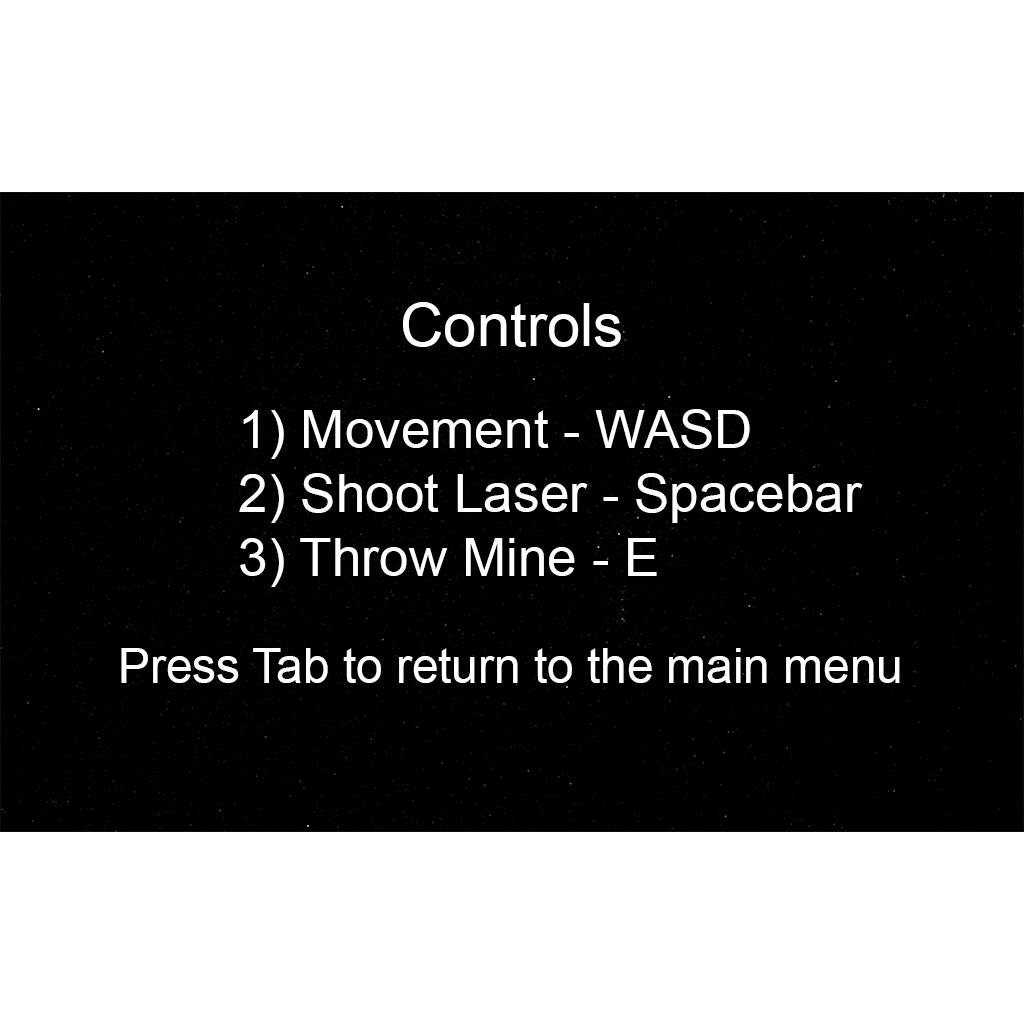
<style>
.page{position:relative;width:1024px;height:1024px;background:#000000}
.page>*{position:absolute;margin:0}
.t1{font:60px "ArialMT";color:#ffffff}
.t2{font:53.1px "ArialMT";color:#ffffff}
.t3{font:47.8px "ArialMT";color:#ffffff}
</style>
<div class="page">
<p class="t1" style="left:403px;top:302px;width:218px;height:45px">Controls</p>
<p class="t2" style="left:239px;top:409px;width:624px;height:178px">1) Movement - WASD<br>2) Shoot Laser - Spacebar<br>3) Throw Mine - E</p>
<p class="t3" style="left:121px;top:648px;width:779px;height:35px">Press Tab to return to the main menu</p>
</div>
